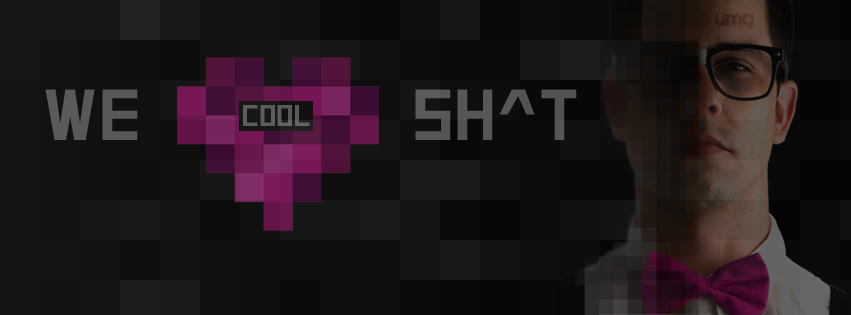
<style>
.page{position:relative;width:851px;height:315px}
.page>*{position:absolute;margin:0}
.t1{font:72px "SquareFont";color:#585858}
.t2{font:72px "SquareFont";color:#565656}
.t3{font:30px "SquareFont";color:#5d5d5d}
</style>
<div class="page">
<p class="t1" style="left:45px;top:89px;width:93px;height:51px">we</p>
<p class="t2" style="left:415px;top:89px;width:162px;height:51px">sh^t</p>
<p class="t3" style="left:243px;top:105px;width:67px;height:21px">cool</p>
</div>
